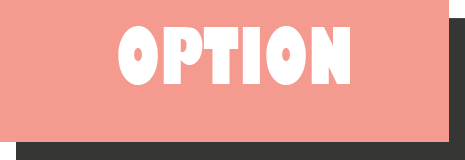
<style>
.page{position:relative;width:465px;height:160px;background:#f59a8e}
.page>*{position:absolute;margin:0}
.t1{font:75.6px "GillSans-UltraBoldCondensed";color:#ffffff}
</style>
<div class="page">
<p class="t1" style="left:118px;top:26px;width:232px;height:59px">OPTION</p>
</div>
